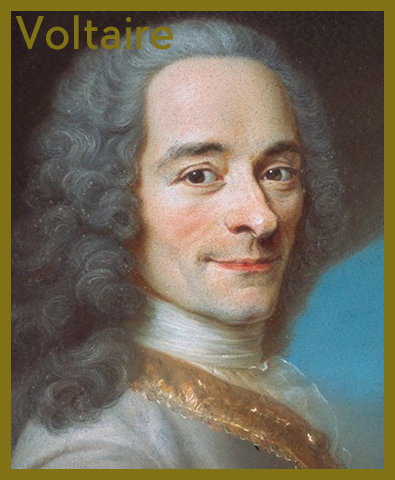
<style>
.page{position:relative;width:395px;height:480px}
.page>*{position:absolute;margin:0}
.t1{font:44px "PierSans";color:#807215}
</style>
<div class="page">
<p class="t1" style="left:15px;top:15px;width:158px;height:35px">Voltaire</p>
</div>
